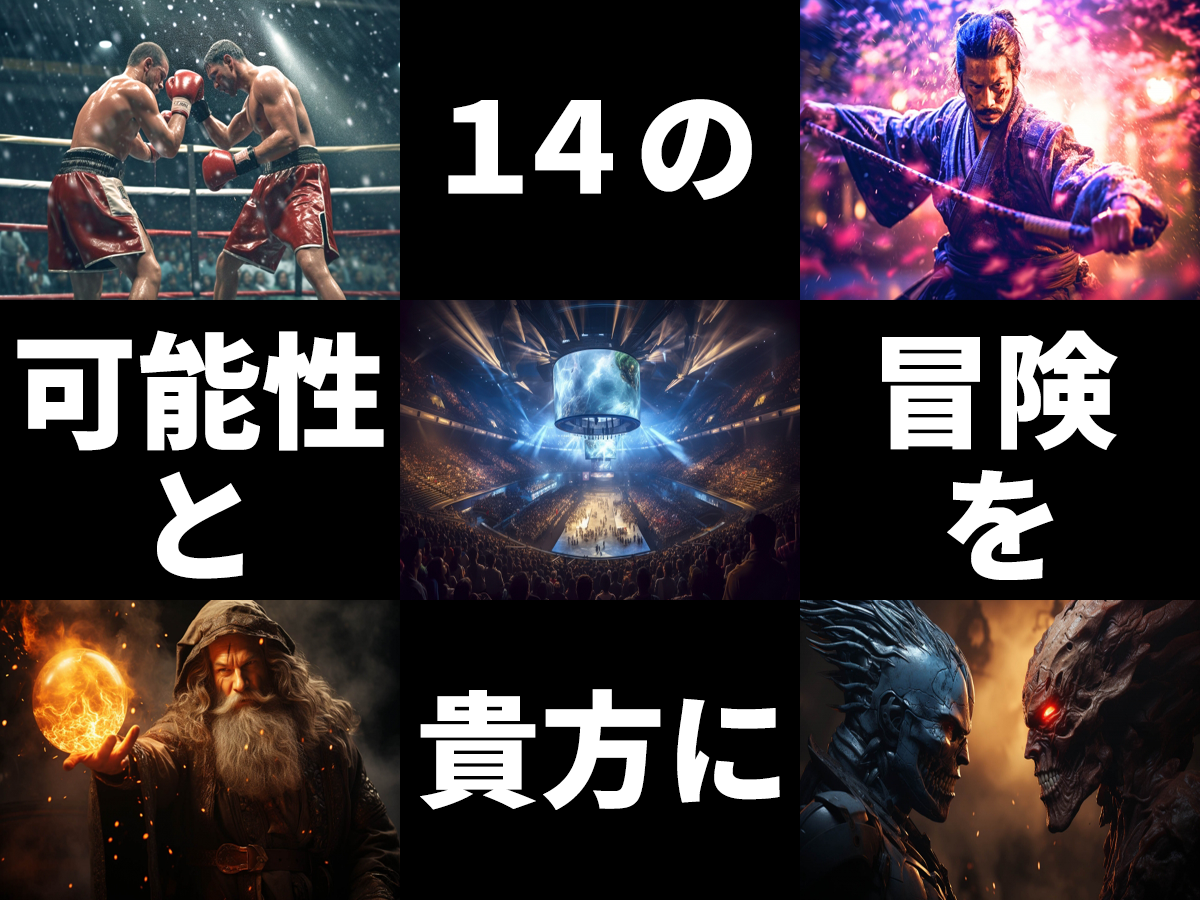
<style>
.page{position:relative;width:1200px;height:900px;background:#000000}
.page>*{position:absolute;margin:0}
.t1{font:125px "SourceHanCodeJP-HeavyIt";color:#ffffff}
</style>
<div class="page">
<p class="t1" style="left:448px;top:99px;width:304px;height:101px">１４の</p>
<p class="t1" style="left:17px;top:330px;width:367px;height:121px">可能性</p>
<p class="t1" style="left:882px;top:330px;width:236px;height:121px">冒険</p>
<p class="t1" style="left:157px;top:471px;width:86px;height:108px">と</p>
<p class="t1" style="left:947px;top:470px;width:107px;height:110px">を</p>
<p class="t1" style="left:420px;top:689px;width:360px;height:121px">貴方に</p>
</div>
